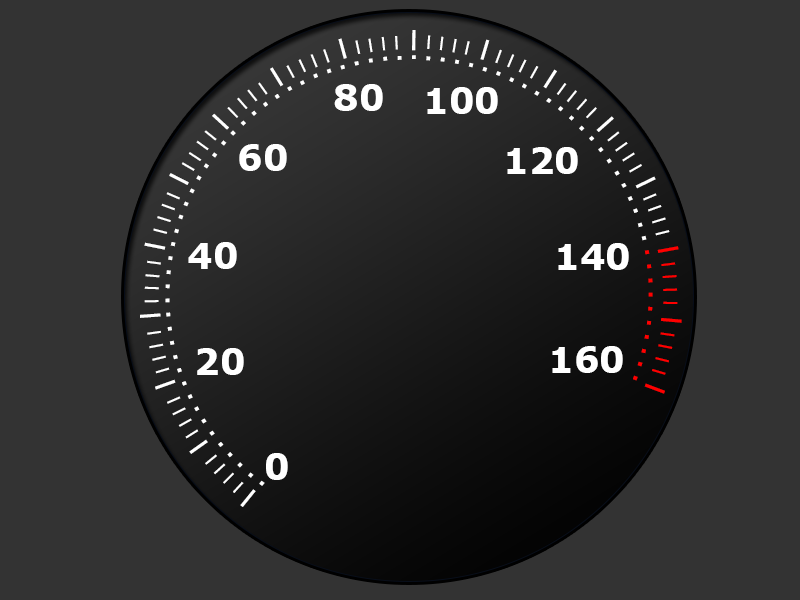
<style>
.page{position:relative;width:800px;height:600px;background:#333333}
.page>*{position:absolute;margin:0}
.t1{font:14.2px "Verdana-Bold";color:#ff0000}
.t2{font:21.3px "Verdana-Bold";color:#ff0000}
.t3{font:14.2px "Verdana-Bold";color:#ffffff}
.t4{font:21.3px "Verdana-Bold";color:#ffffff}
.t5{font:36px "Verdana-Bold";color:#ffffff}
</style>
<div class="page">
<p class="t1" style="left:140px;top:30px;width:542px;height:477px;text-align:right"><span class="t2">| </span>| | | | <span class="t2">| </span>| | | | <span class="t2">| </span><span class="t3">| | | | </span><span class="t4">| </span><span class="t3">| | | | </span><span class="t4">| </span><span class="t3">| | | | </span><span class="t4">| </span><span class="t3">| | | | </span><span class="t4">| </span><span class="t3">| | | | </span><span class="t4">| </span><span class="t3">| | | | </span><span class="t4">| </span><span class="t3">| | | | </span><span class="t4">| </span><span class="t3">| | | | </span><span class="t4">| </span><span class="t3">| | | | </span><span class="t4">| </span><span class="t3">| | | | </span><span class="t4">| </span><span class="t3">| | | | </span><span class="t4">| </span><span class="t3">| | | | </span><span class="t4">| </span><span class="t3">| | | | </span><span class="t4">| </span><span class="t3">| | | | </span><span class="t4">|</span></p>
<p class="t5" style="left:334px;top:84px;width:49px;height:27px">80</p>
<p class="t5" style="left:427px;top:87px;width:71px;height:27px">100</p>
<p class="t5" style="left:239px;top:144px;width:48px;height:27px">60</p>
<p class="t5" style="left:507px;top:147px;width:71px;height:27px">120</p>
<p class="t5" style="left:188px;top:242px;width:49px;height:27px">40</p>
<p class="t5" style="left:558px;top:243px;width:71px;height:27px">140</p>
<p class="t5" style="left:197px;top:348px;width:47px;height:27px">20</p>
<p class="t5" style="left:552px;top:346px;width:71px;height:27px">160</p>
<p class="t5" style="left:266px;top:453px;width:22px;height:27px">0</p>
</div>
